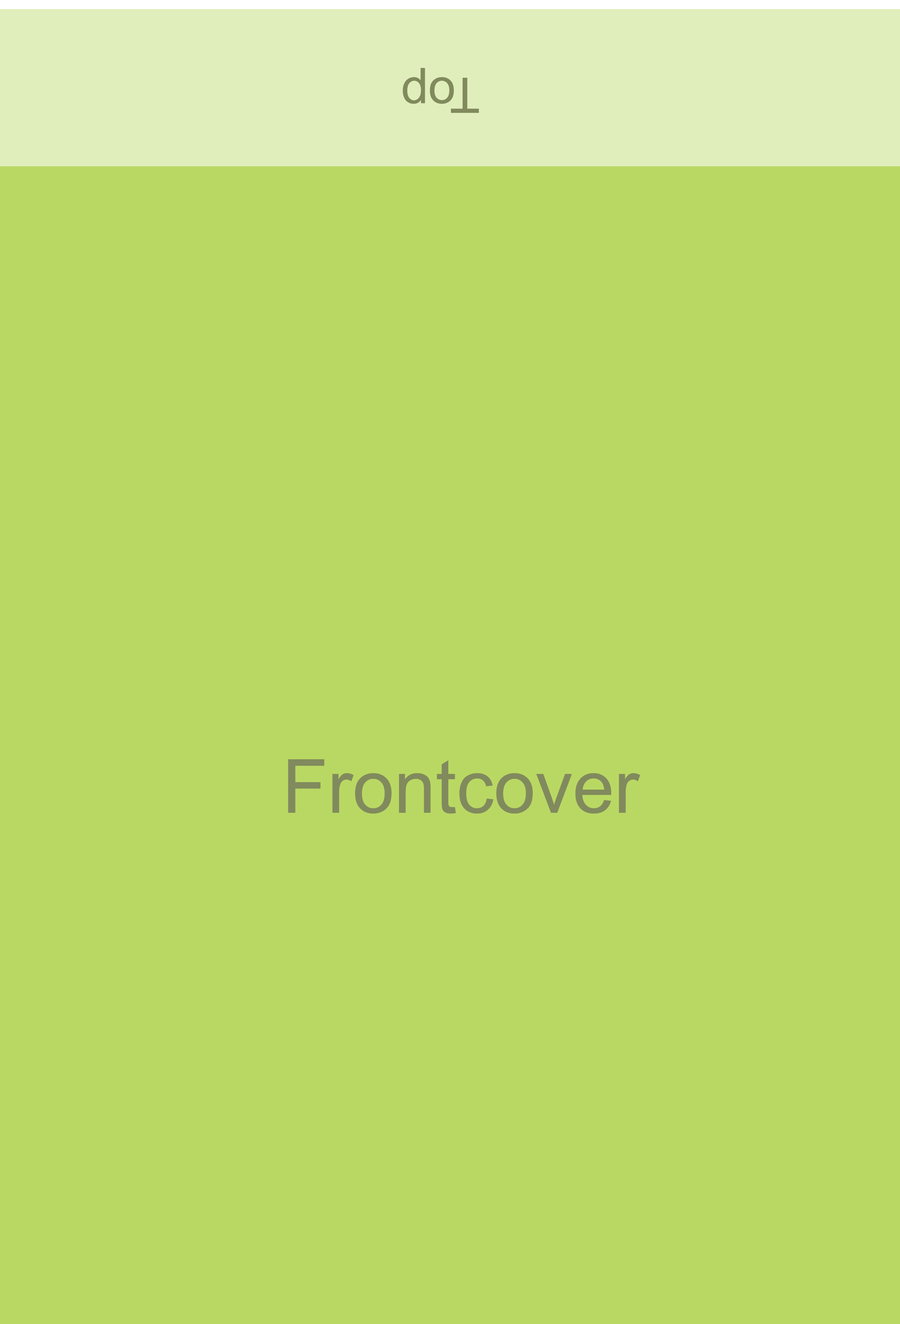
<style>
.page{position:relative;width:900px;height:1324px;background:#b9d863}
.page>*{position:absolute;margin:0}
.t1{font:49.1px "ArialMT";color:#818a5d}
.t2{font:74.8px "ArialMT";color:#818a5d}
</style>
<div class="page">
<p class="t1" style="left:403px;top:68px;width:76px;height:45px;rotate:180deg">Top</p>
<p class="t2" style="left:288px;top:759px;width:353px;height:55px">Frontcover</p>
</div>
